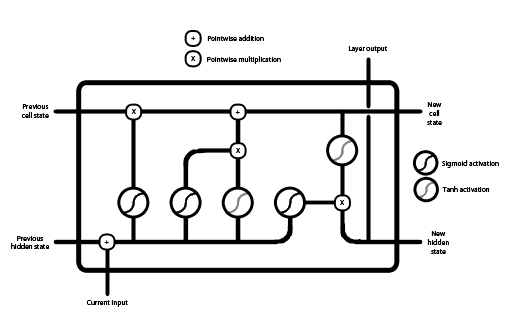
<style>
.page{position:relative;width:516px;height:322px;background:#ffffff}
.page>*{position:absolute;margin:0}
.t1{font:7.3px "MyriadPro-Regular";color:#000000}
</style>
<div class="page">
<p class="t1" style="left:191px;top:36px;width:5px;height:4px">+</p>
<p class="t1" style="left:207px;top:35px;width:57px;height:6px">Pointwise addition</p>
<p class="t1" style="left:348px;top:46px;width:39px;height:7px">Layer output</p>
<p class="t1" style="left:191px;top:56px;width:4px;height:5px">X</p>
<p class="t1" style="left:207px;top:56px;width:74px;height:8px">Pointwise multiplication</p>
<p class="t1" style="left:427px;top:102px;width:15px;height:23px;text-align:center">New<br>cell<br>state</p>
<p class="t1" style="left:21px;top:104px;width:28px;height:14px;text-align:center">Previous<br>cell state</p>
<p class="t1" style="left:132px;top:109px;width:4px;height:5px">X</p>
<p class="t1" style="left:235px;top:110px;width:5px;height:4px">+</p>
<p class="t1" style="left:236px;top:148px;width:4px;height:5px">X</p>
<p class="t1" style="left:442px;top:160px;width:57px;height:8px">Sigmoid activation</p>
<p class="t1" style="left:442px;top:186px;width:48px;height:6px">Tanh activation</p>
<p class="t1" style="left:340px;top:200px;width:4px;height:5px">X</p>
<p class="t1" style="left:427px;top:231px;width:22px;height:23px;text-align:center">New<br>hidden<br>state</p>
<p class="t1" style="left:11px;top:236px;width:39px;height:13px;text-align:center">Previous<br>hidden state</p>
<p class="t1" style="left:104px;top:240px;width:5px;height:4px">+</p>
<p class="t1" style="left:86px;top:300px;width:42px;height:7px">Current input</p>
</div>
